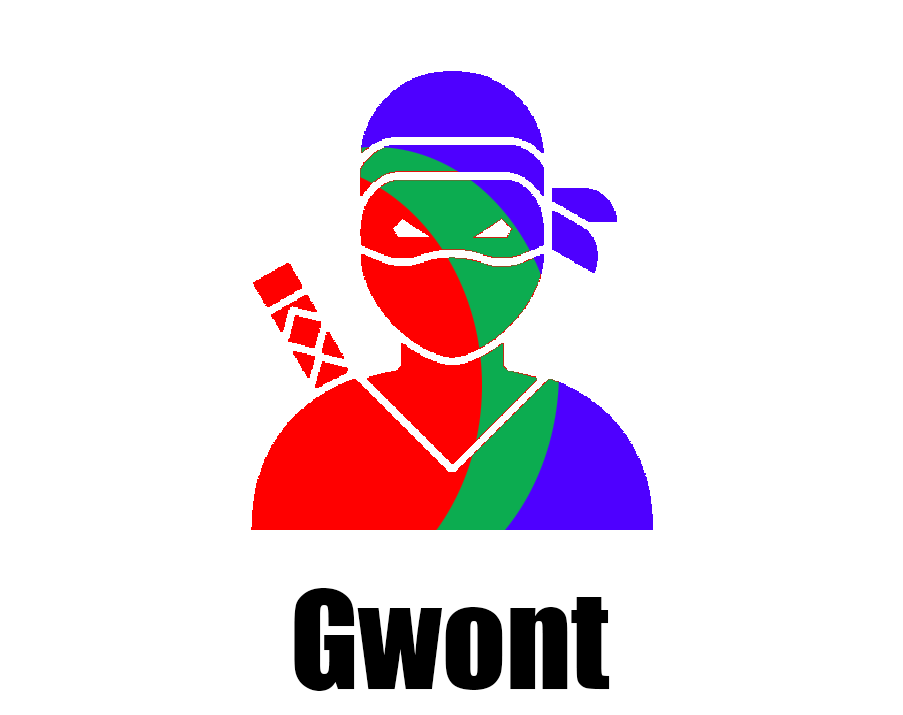
<style>
.page{position:relative;width:903px;height:715px;background:#ffffff}
.page>*{position:absolute;margin:0}
.t1{font:125px "Impact";color:#000000}
</style>
<div class="page">
<p class="t1" style="left:294px;top:588px;width:316px;height:103px">Gwont</p>
</div>
